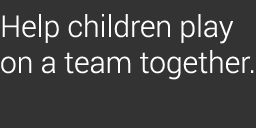
<style>
.page{position:relative;width:256px;height:128px;background:#333333}
.page>*{position:absolute;margin:0}
.t1{font:30px "Roboto-Light";color:#ffffff}
</style>
<div class="page">
<p class="t1" style="left:1px;top:14px;width:253px;height:66px">Help children play on a team together.</p>
</div>
